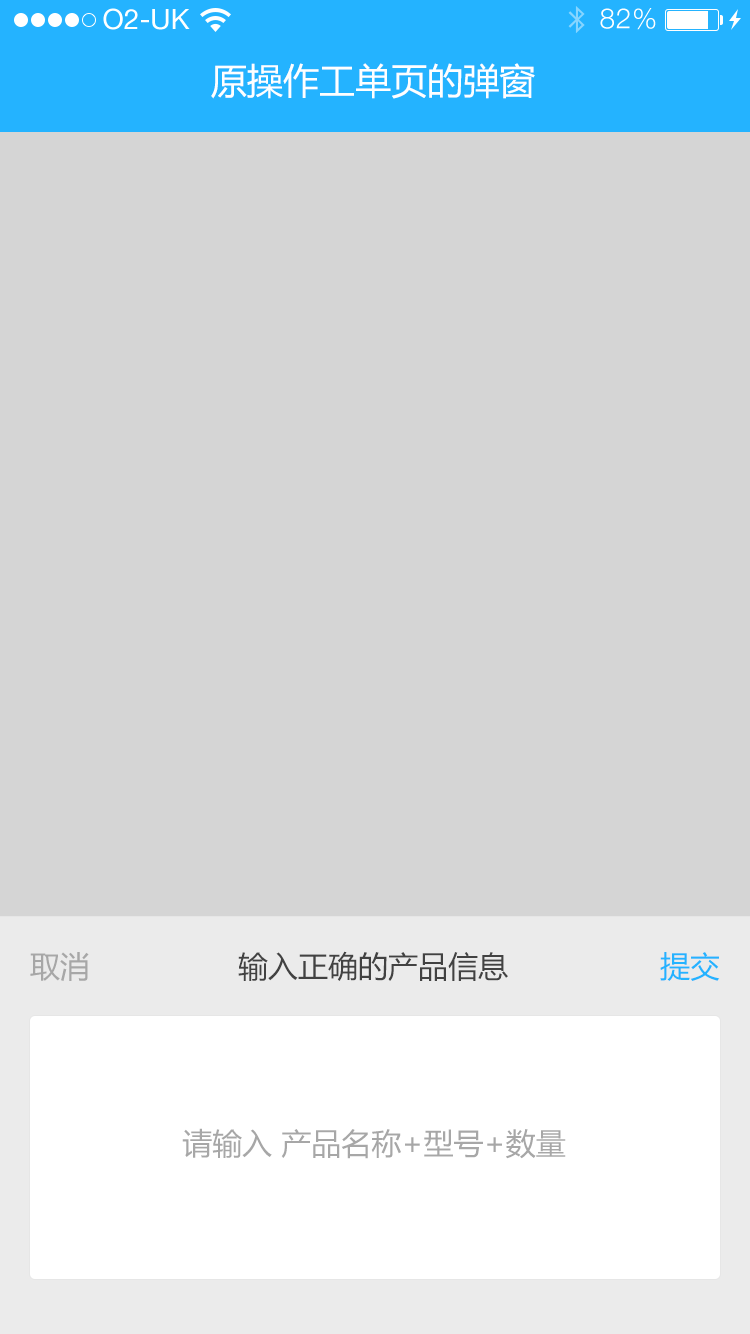
<style>
.page{position:relative;width:750px;height:1334px;background:#d5d5d5}
.page>*{position:absolute;margin:0}
.t1{font:36px "MicrosoftYaHei";color:#feffff}
.t2{font:30px "MicrosoftYaHei";color:#a7a7a7}
.t3{font:30px "MicrosoftYaHei";color:#424242}
.t4{font:30px "MicrosoftYaHei";color:#24b3ff}
</style>
<div class="page">
<p class="t1" style="left:211px;top:63px;width:324px;height:36px">原操作工单页的弹窗</p>
<p class="t2" style="left:30px;top:952px;width:59px;height:29px">取消</p>
<p class="t3" style="left:238px;top:951px;width:270px;height:30px">输入正确的产品信息</p>
<p class="t4" style="left:660px;top:952px;width:60px;height:29px">提交</p>
<p class="t2" style="left:182px;top:1128px;width:384px;height:31px">请输入 产品名称+型号+数量</p>
</div>
